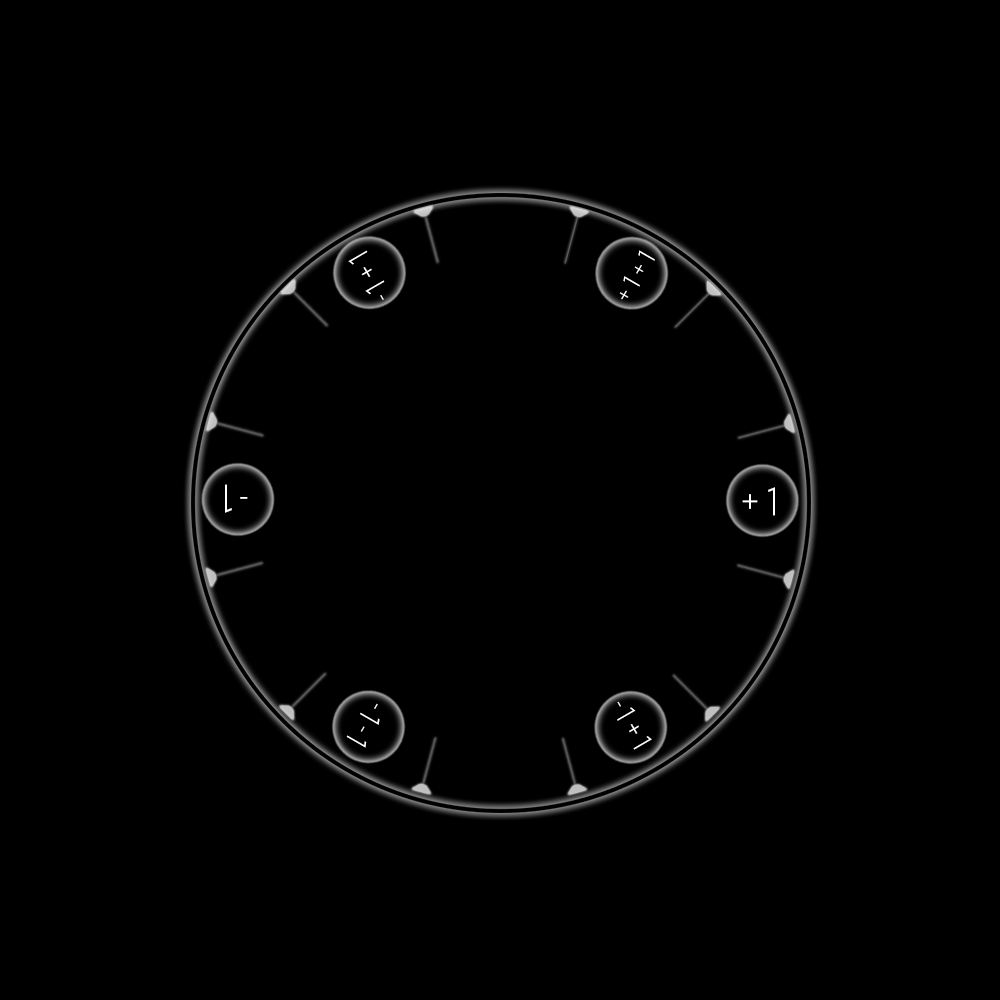
<style>
.page{position:relative;width:1000px;height:1000px;background:#000000}
.page>*{position:absolute;margin:0}
.t1{font:30.8px "ARBONNIE";letter-spacing:0.1em;color:#ffffff}
.t2{font:26.8px "ARBONNIE";letter-spacing:0.1em;color:#ffffff}
.t3{font:41.5px "ARBONNIE";letter-spacing:0.1em;color:#ffffff}
.t4{font:29.9px "ARBONNIE";letter-spacing:0.1em;color:#ffffff}
.t5{font:32.1px "ARBONNIE";letter-spacing:0.1em;color:#ffffff}
</style>
<div class="page">
<p class="t1" style="left:348px;top:250px;width:37px;height:50px;rotate:-120deg">-1+1</p>
<p class="t2" style="left:619px;top:250px;width:36px;height:50px;rotate:-60deg">+1+1</p>
<p class="t3" style="left:225px;top:484px;width:23px;height:29px;rotate:180deg">-1</p>
<p class="t3" style="left:742px;top:487px;width:33px;height:29px">+1</p>
<p class="t4" style="left:617px;top:701px;width:35px;height:49px;rotate:60deg">-1+1</p>
<p class="t5" style="left:346px;top:703px;width:34px;height:45px;rotate:120deg">-1-1</p>
</div>
